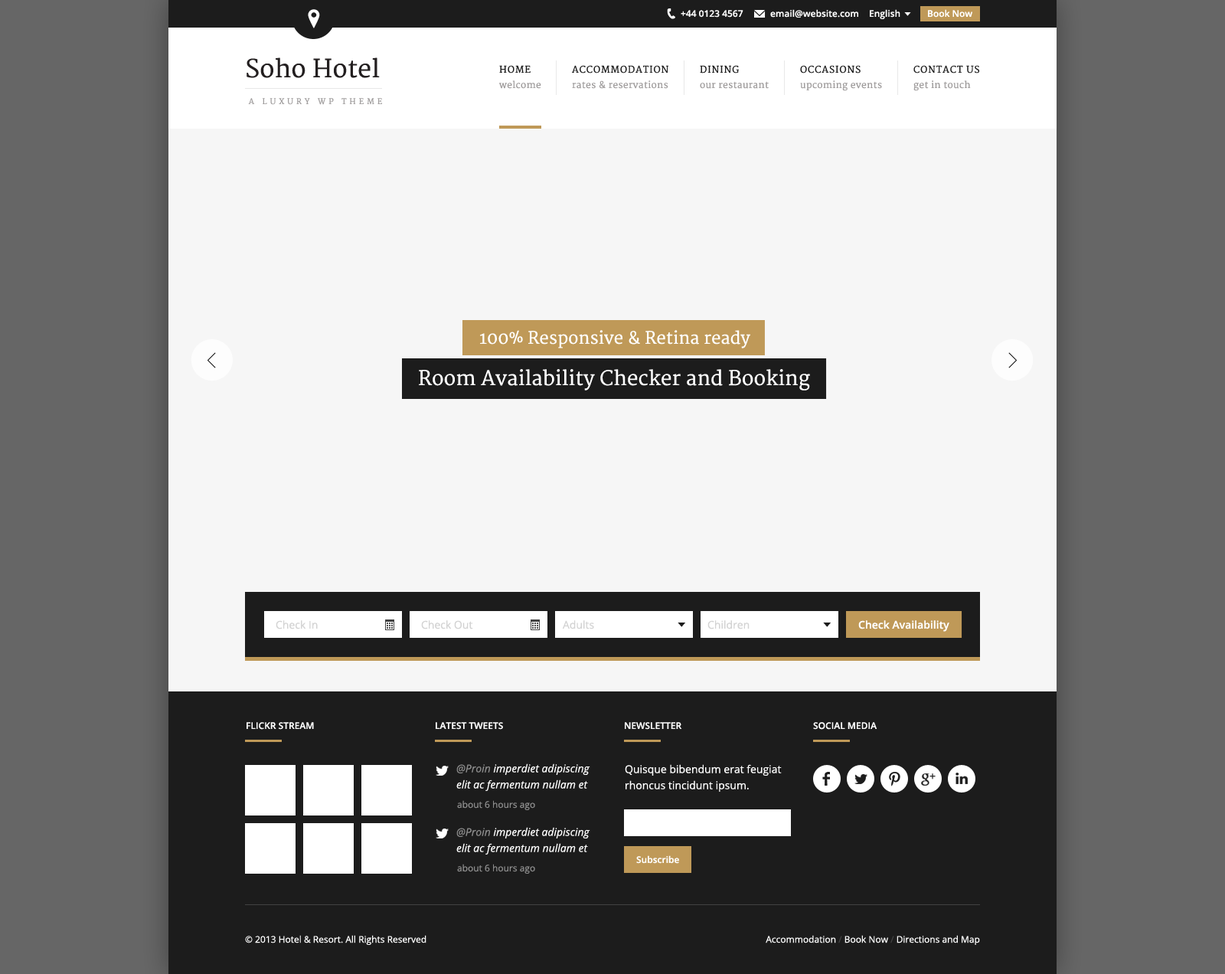
<style>
.page{position:relative;width:1225px;height:974px;background:#f6f6f6}
.page>*{position:absolute;margin:0}
.t1{font:9.2px "OpenSans-Semibold";color:#ffffff}
.t2{font:24.5px "Merriweather";color:#231f20}
.t3{font:9.2px "Merriweather";letter-spacing:0.075em;color:#1c1c1c;text-transform:uppercase}
.t4{font:9.2px "Merriweather";letter-spacing:0.025em;color:#a09d9d}
.t5{font:7.7px "Merriweather";letter-spacing:0.4em;color:#a09d9d;text-transform:uppercase}
.t6{font:16.8px "Merriweather";color:#ffffff}
.t7{font:19.9px "Merriweather";color:#ffffff}
.t8{font:10.7px "OpenSans";color:#d3d3d3}
.t9{font:10.7px "OpenSans-Semibold";color:#ffffff}
.t10{font:9.2px "OpenSans-Semibold";color:#ffffff;text-transform:uppercase}
.t11{font:10.7px/16.1px "OpenSans-Italic";color:#ffffff}
.t12{font:10.7px/16.1px "OpenSans-Italic";color:#8b8b8b}
.t13{font:10.7px/16.1px "OpenSans";color:#ffffff}
.t14{font:9.2px "OpenSans";color:#8b8b8b}
.t15{font:9.2px "OpenSans";color:#ffffff}
.t16{font:9.2px "OpenSans";color:#424242}
</style>
<div class="page">
<p class="t1" style="left:680px;top:10px;width:63px;height:8px">+44 0123 4567</p>
<p class="t1" style="left:770px;top:9px;width:88px;height:9px">email@website.com</p>
<p class="t1" style="left:870px;top:9px;width:30px;height:10px">English</p>
<p class="t1" style="left:928px;top:9px;width:44px;height:9px">Book Now</p>
<p class="t2" style="left:246px;top:57px;width:134px;height:21px">Soho Hotel</p>
<p class="t3" style="left:499px;top:65px;width:31px;height:8px">Home</p>
<p class="t3" style="left:572px;top:65px;width:96px;height:8px">Accommodation</p>
<p class="t3" style="left:700px;top:65px;width:39px;height:8px">Dining</p>
<p class="t3" style="left:800px;top:65px;width:60px;height:8px">Occasions</p>
<p class="t3" style="left:913px;top:65px;width:66px;height:8px">Contact Us</p>
<p class="t4" style="left:499px;top:80px;width:42px;height:9px">welcome</p>
<p class="t4" style="left:572px;top:80px;width:96px;height:9px">rates &amp; reservations</p>
<p class="t4" style="left:700px;top:81px;width:69px;height:8px">our restaurant</p>
<p class="t4" style="left:800px;top:80px;width:82px;height:11px">upcoming events</p>
<p class="t4" style="left:913px;top:80px;width:58px;height:11px">get in touch</p>
<p class="t5" style="left:248px;top:98px;width:134px;height:7px">A Luxury WP Theme</p>
<p class="t6" style="left:480px;top:330px;width:270px;height:18px">100% Responsive &amp; Retina ready</p>
<p class="t7" style="left:419px;top:369px;width:391px;height:21px">Room Availability Checker and Booking</p>
<p class="t8" style="left:276px;top:620px;width:42px;height:9px">Check In</p>
<p class="t8" style="left:421px;top:620px;width:52px;height:9px">Check Out</p>
<p class="t8" style="left:562px;top:620px;width:32px;height:9px">Adults</p>
<p class="t8" style="left:707px;top:620px;width:42px;height:9px">Children</p>
<p class="t9" style="left:858px;top:620px;width:91px;height:11px">Check Availability</p>
<p class="t10" style="left:246px;top:722px;width:68px;height:7px">Flickr Stream</p>
<p class="t10" style="left:436px;top:722px;width:67px;height:7px">Latest Tweets</p>
<p class="t10" style="left:625px;top:722px;width:57px;height:7px">Newsletter</p>
<p class="t10" style="left:813px;top:722px;width:64px;height:7px">Social Media</p>
<p class="t11" style="left:456px;top:763px;width:134px;height:28px"><span class="t12">@Proin </span>imperdiet adipiscing elit ac fermentum nullam et</p>
<p class="t13" style="left:625px;top:764px;width:157px;height:27px">Quisque bibendum erat feugiat rhoncus tincidunt ipsum.</p>
<p class="t14" style="left:457px;top:800px;width:78px;height:10px">about 6 hours ago</p>
<p class="t11" style="left:456px;top:827px;width:134px;height:27px"><span class="t12">@Proin</span> imperdiet adipiscing elit ac fermentum nullam et</p>
<p class="t1" style="left:636px;top:855px;width:43px;height:8px">Subscribe</p>
<p class="t14" style="left:457px;top:863px;width:78px;height:10px">about 6 hours ago</p>
<p class="t15" style="left:245px;top:935px;width:181px;height:10px">© 2013 Hotel &amp; Resort. All Rights Reserved</p>
<p class="t15" style="left:765px;top:935px;width:215px;height:10px">Accommodation <span class="t16">/</span> Book Now <span class="t16">/</span> Directions and Map</p>
</div>
